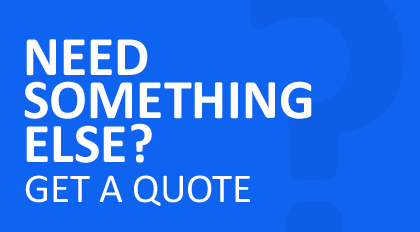
<style>
.page{position:relative;width:420px;height:232px;background:#0e63f0}
.page>*{position:absolute;margin:0}
.t1{font:56.2px/43.8px "Calibri-Bold";color:#ffffff}
.t2{font:41.2px "Calibri";color:#ffffff}
</style>
<div class="page">
<p class="t1" style="left:24px;top:39px;width:288px;height:124px">NEED<br>SOMETHING<br>ELSE?</p>
<p class="t2" style="left:25px;top:175px;width:225px;height:31px">GET A QUOTE</p>
</div>
